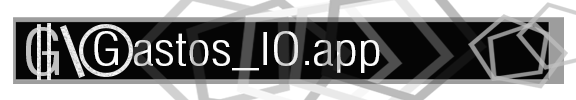
<style>
.page{position:relative;width:576px;height:100px;background:#050505}
.page>*{position:absolute;margin:0}
.t1{font:63.2px "HelveticaLTStd-LightCond";letter-spacing:0.1em;color:#c1c1c1;scale:1.22 1}
.t2{font:44.1px "HelveticaLTStd-LightCond";color:#fffafa;scale:1.22 1}
.t3{font:44.1px "HelveticaLTStd-LightCond";letter-spacing:0.2em;color:#fffafa;scale:1.22 1}
</style>
<div class="page">
<p class="t1" style="left:26px;top:27px;width:33px;height:49px">G</p>
<p class="t2" style="left:94px;top:31px;width:286px;height:42px"><span class="t3">G</span>astos_IO.app</p>
</div>
